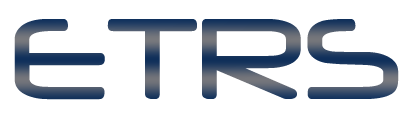
<style>
.page{position:relative;width:412px;height:113px;background:#ffffff}
.page>*{position:absolute;margin:0}
.t1{font:133.8px "Neuropol"}
</style>
<div class="page">
<p class="t1" style="left:14px;top:19px;width:385px;height:81px">ETRS</p>
</div>
